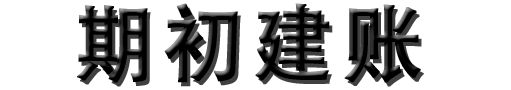
<style>
.page{position:relative;width:511px;height:90px;background:#ffffff}
.page>*{position:absolute;margin:0}
.t1{font:85.1px "AdobeHeitiStd-Regular";letter-spacing:0.075em;color:#000000;font-weight:bold;scale:0.95 1}
</style>
<div class="page">
<p class="t1" style="left:77px;top:3px;width:344px;height:80px">期初建账</p>
</div>
